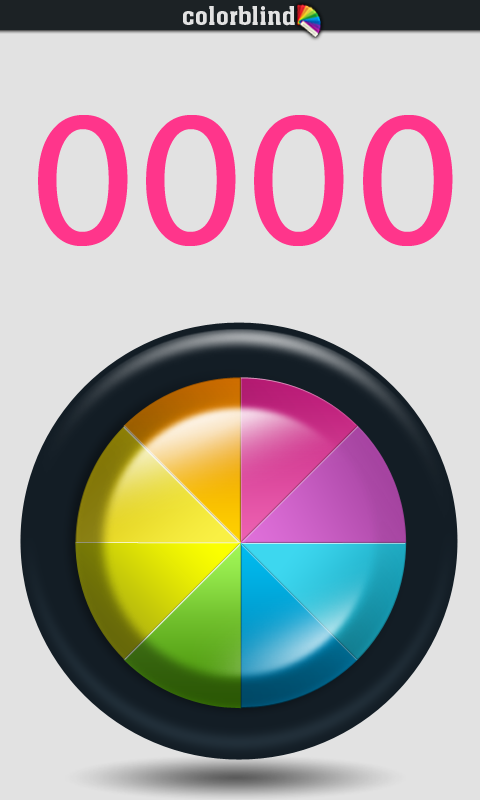
<style>
.page{position:relative;width:480px;height:800px;background:#e2e2e2}
.page>*{position:absolute;margin:0}
.t1{font:27.2px "AachenMediumPlain";letter-spacing:0.025em;color:#e1e1e1}
.t2{font:194.7px "MyriadWebPro";letter-spacing:0.025em;color:#ff358b}
</style>
<div class="page">
<p class="t1" style="left:183px;top:6px;width:112px;height:20px">colorblind</p>
<p class="t2" style="left:38px;top:115px;width:415px;height:131px">0000</p>
</div>
